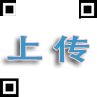
<style>
.page{position:relative;width:97px;height:97px;background:#ffffff}
.page>*{position:absolute;margin:0}
.t1{font:27.9px "AdobeHeitiStd-Regular";letter-spacing:-0.02em;color:#3897c4;font-weight:bold;scale:1.37 1}
</style>
<div class="page">
<p class="t1" style="left:7px;top:35px;width:82px;height:28px">上 传</p>
</div>
